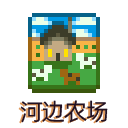
<style>
.page{position:relative;width:128px;height:128px;background:#ffffff}
.page>*{position:absolute;margin:0}
.t1{font:24px "AlibabaPuHuiTi-Regular";letter-spacing:-0.06em;color:#221122}
</style>
<div class="page">
<p class="t1" style="left:20px;top:100px;width:88px;height:23px">河边农场</p>
</div>
